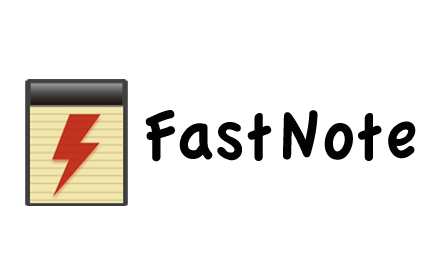
<style>
.page{position:relative;width:440px;height:280px;background:#ffffff}
.page>*{position:absolute;margin:0}
.t1{font:72px "AppleCasual";color:#020202}
</style>
<div class="page">
<p class="t1" style="left:145px;top:110px;width:127px;height:52px">Fast</p>
<p class="t1" style="left:283px;top:110px;width:133px;height:51px">Note</p>
</div>
